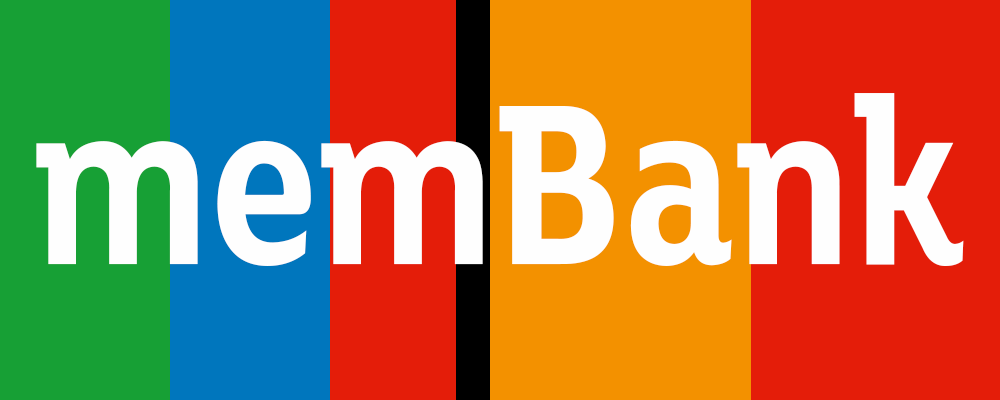
<style>
.page{position:relative;width:1000px;height:400px;background:#e41d09}
.page>*{position:absolute;margin:0}
.t1{font:250px "FS-Lola-Bold-Regular";color:#fefefe;scale:0.83 1}
</style>
<div class="page">
<p class="t1" style="left:36px;top:93px;width:928px;height:173px">memBank</p>
</div>
